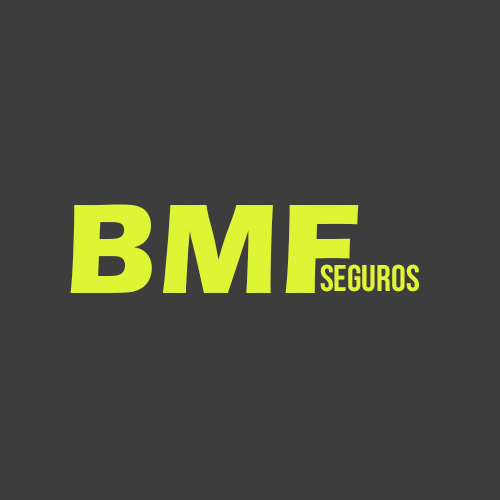
<style>
.page{position:relative;width:500px;height:500px;background:#3e3d3d}
.page>*{position:absolute;margin:0}
.t1{font:131.5px "ErasITC-Bold";color:#e0f436}
.t2{font:37px "BebasNeue-Regular";color:#e0f436}
</style>
<div class="page">
<p class="t1" style="left:70px;top:204px;width:289px;height:89px">BMF</p>
<p class="t2" style="left:320px;top:264px;width:99px;height:28px">SEGUROS</p>
</div>
